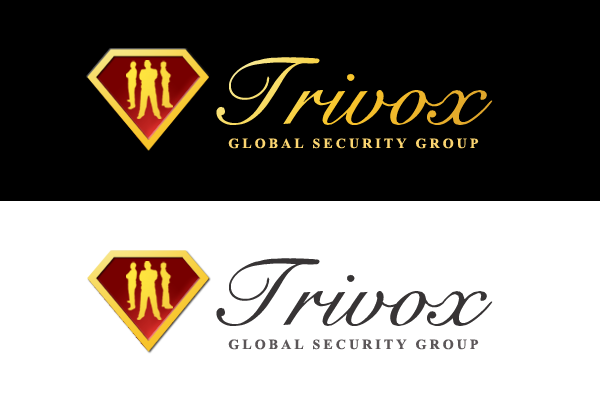
<style>
.page{position:relative;width:600px;height:400px;background:#000000}
.page>*{position:absolute;margin:0}
.t1{font:90px "CygnetRound"}
.t2{font:90px "CygnetRound";letter-spacing:-0.02em}
.t3{font:14px "TimesNewRomanPS-BoldMT";letter-spacing:0.22em;color:#fbd571}
.t4{font:90px "CygnetRound";color:#373435}
.t5{font:90px "CygnetRound";letter-spacing:-0.02em;color:#373435}
.t6{font:14px "TimesNewRomanPS-BoldMT";letter-spacing:0.22em;color:#5b5658}
</style>
<div class="page">
<p class="t1" style="left:216px;top:57px;width:277px;height:68px">Trivo<span class="t2">x</span></p>
<p class="t3" style="left:228px;top:138px;width:251px;height:11px">GLOBAL SECURITY GROUP</p>
<p class="t4" style="left:216px;top:258px;width:277px;height:68px">Trivo<span class="t5">x</span></p>
<p class="t6" style="left:228px;top:339px;width:251px;height:11px">GLOBAL SECURITY GROUP</p>
</div>
